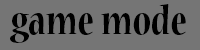
<style>
.page{position:relative;width:200px;height:50px;background:#757575}
.page>*{position:absolute;margin:0}
.t1{font:44px "NuevaStd-BoldCond";color:#000000}
</style>
<div class="page">
<p class="t1" style="left:10px;top:4px;width:176px;height:39px">game mode</p>
</div>
